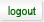
<style>
.page{position:relative;width:44px;height:22px}
.page>*{position:absolute;margin:0}
.t1{font:12.5px "ArialNarrow";color:#066402}
</style>
<div class="page">
<p class="t1" style="left:8px;top:6px;width:28px;height:11px">logout</p>
</div>
